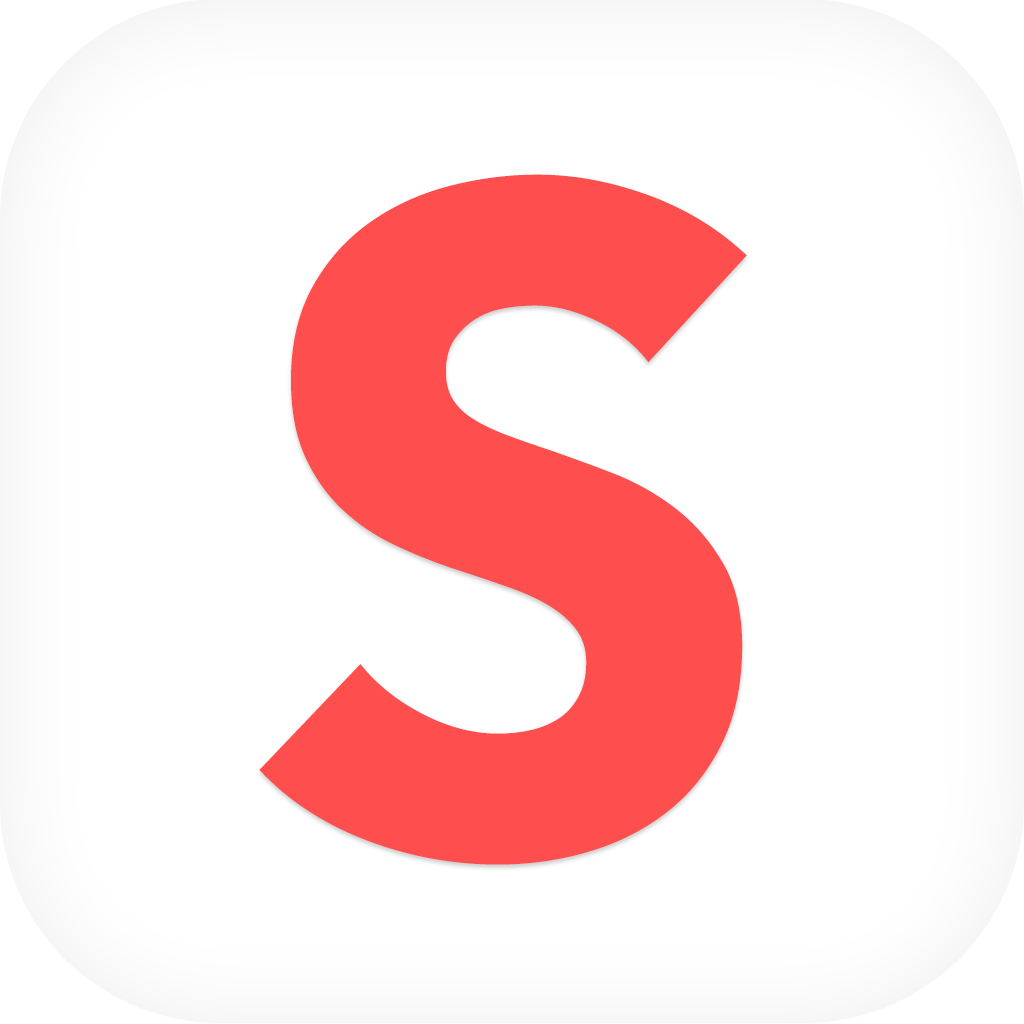
<style>
.page{position:relative;width:1024px;height:1024px;background:#ffffff}
.page>*{position:absolute;margin:0}
.t1{font:927px "AvenirNext-Bold";letter-spacing:-0.025em;color:#ff4e4e}
</style>
<div class="page">
<p class="t1" style="left:259px;top:174px;width:488px;height:691px">S</p>
</div>
